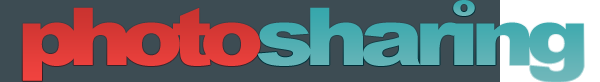
<style>
.page{position:relative;width:600px;height:82px;background:#3d4c53}
.page>*{position:absolute;margin:0}
.t1{font:30px "Arial-Black";letter-spacing:-0.095em;scale:1.2 1}
.t2{font:80px "Arial-Black";letter-spacing:-0.135em;color:#f1433f;scale:1.2 1}
.t3{font:80px "Arial-Black";letter-spacing:-0.095em;color:#52afb3;scale:1.2 1}
</style>
<div class="page">
<p class="t1" style="left:453px;top:0px;width:22px;height:16px">o</p>
<p class="t2" style="left:22px;top:7px;width:239px;height:74px">photo</p>
<p class="t3" style="left:257px;top:7px;width:327px;height:75px">sharing</p>
</div>
